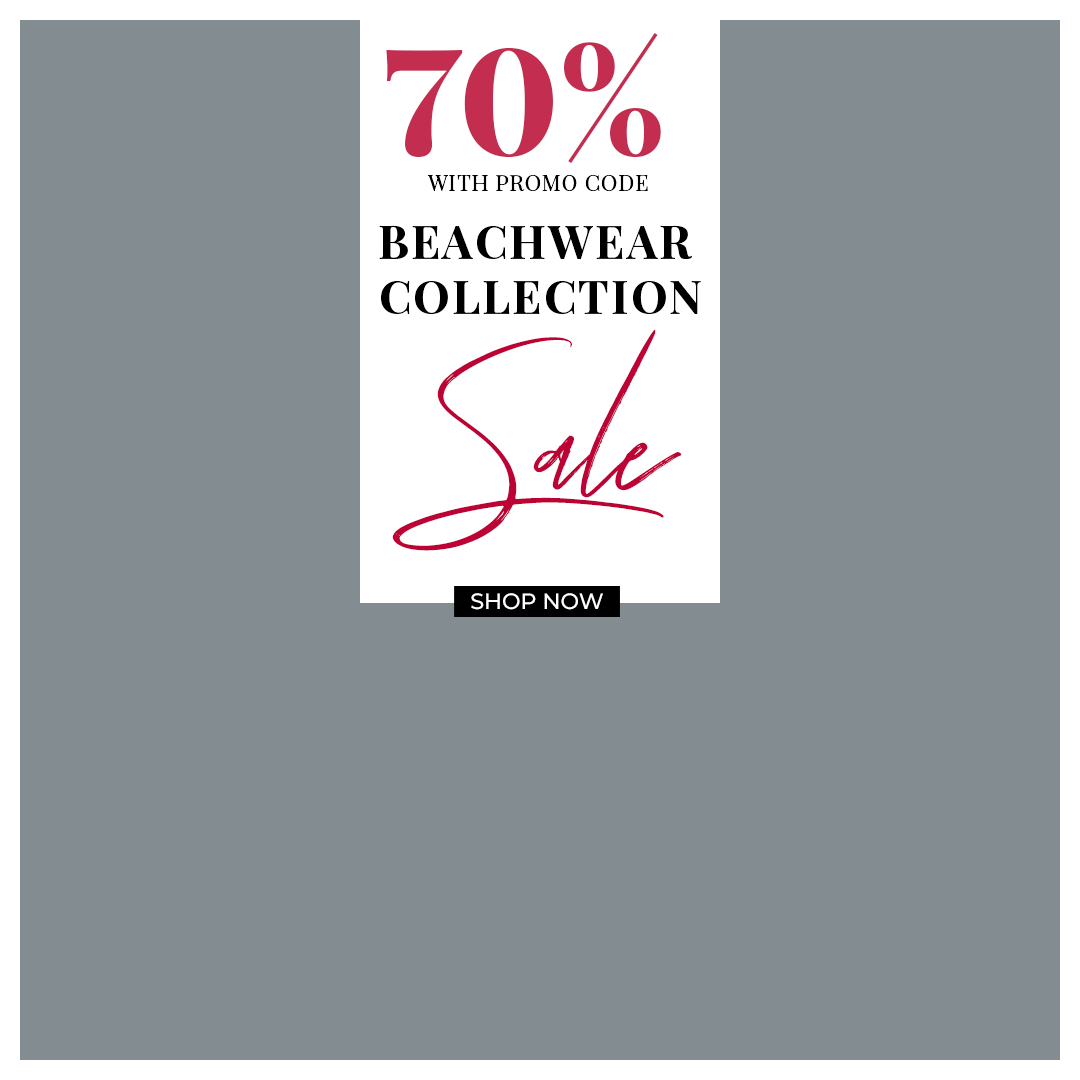
<style>
.page{position:relative;width:1080px;height:1080px;background:#838c91}
.page>*{position:absolute;margin:0}
.t1{font:148px "PlayfairDisplay-Black";color:#c32d50;text-transform:uppercase}
.t2{font:21.7px "PlayfairDisplay-Regular";letter-spacing:0.05em;color:#010101;text-transform:uppercase}
.t3{font:46px "PlayfairDisplay-Bold";letter-spacing:0.05em;color:#000000;text-transform:uppercase}
.t4{font:153.6px "TuesdayNight-Regular";color:#bd0335}
.t5{font:22.2px "Montserrat-Medium";color:#ffffff;text-transform:uppercase}
</style>
<div class="page">
<p class="t1" style="left:386px;top:32px;width:275px;height:132px">70%</p>
<p class="t2" style="left:427px;top:175px;width:221px;height:16px">With Promo Code</p>
<p class="t3" style="left:379px;top:225px;width:322px;height:89px;text-align:center">Beachwear <br>Collection</p>
<p class="t4" style="left:392px;top:329px;width:290px;height:222px">Sale</p>
<p class="t5" style="left:471px;top:593px;width:132px;height:17px">Shop Now</p>
</div>
